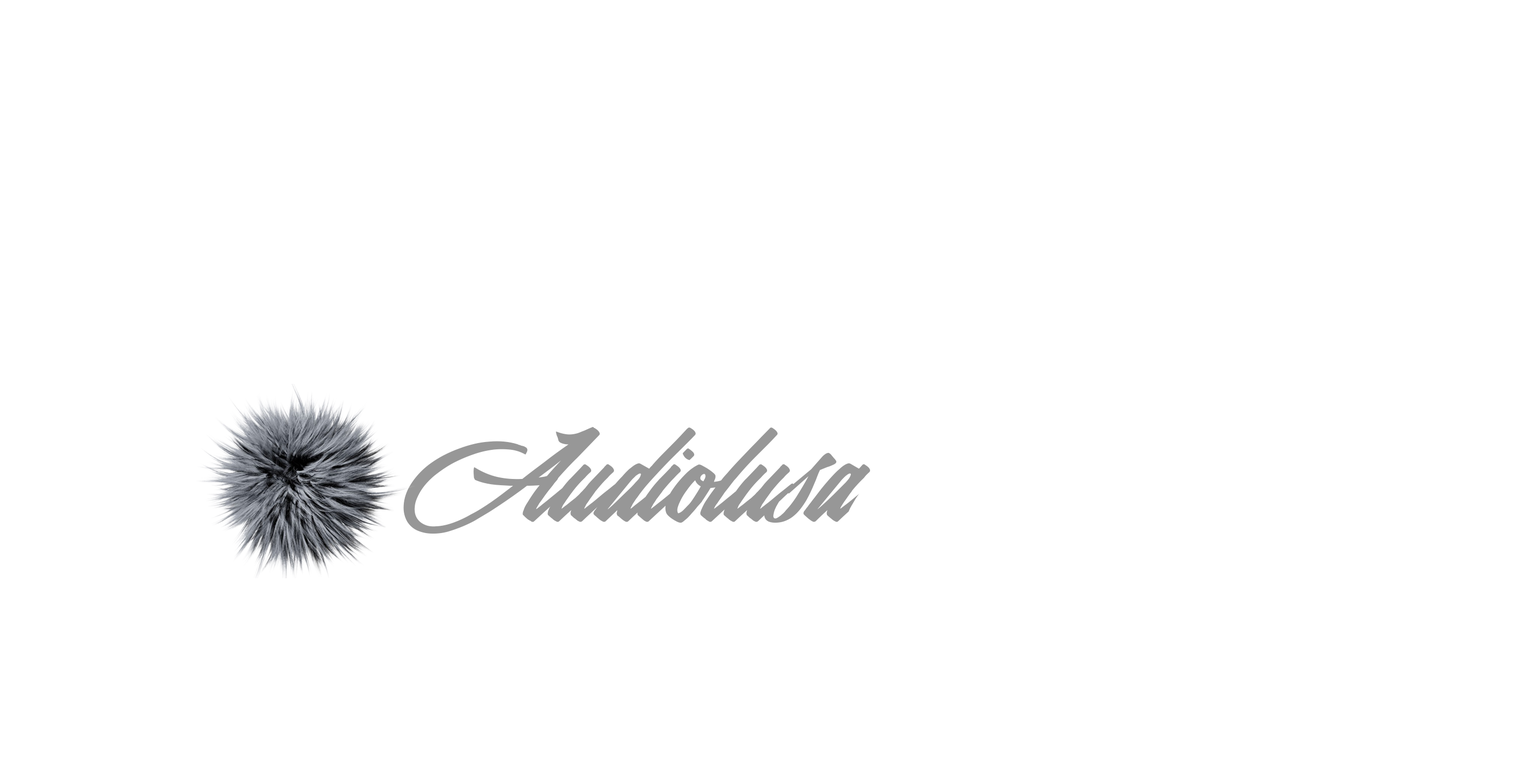
<style>
.page{position:relative;width:1532px;height:778px;background:#ffffff}
.page>*{position:absolute;margin:0}
.t1{font:156.1px "Valencia";color:#979797}
.t2{font:156.1px "Valencia";color:#ffffff}
</style>
<div class="page">
<p class="t1" style="left:403px;top:427px;width:773px;height:107px">Audiolusa<span class="t2">udiolusa</span></p>
</div>
